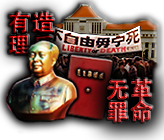
<style>
.page{position:relative;width:164px;height:140px}
.page>*{position:absolute;margin:0}
.t1{font:22.2px/23.9px "AdobeHeitiStd-Regular"}
</style>
<div class="page">
<p class="t1" style="left:9px;top:12px;width:45px;height:43px">造反<br>有理</p>
<p class="t1" style="left:107px;top:79px;width:45px;height:43px">革命<br>无罪</p>
</div>
